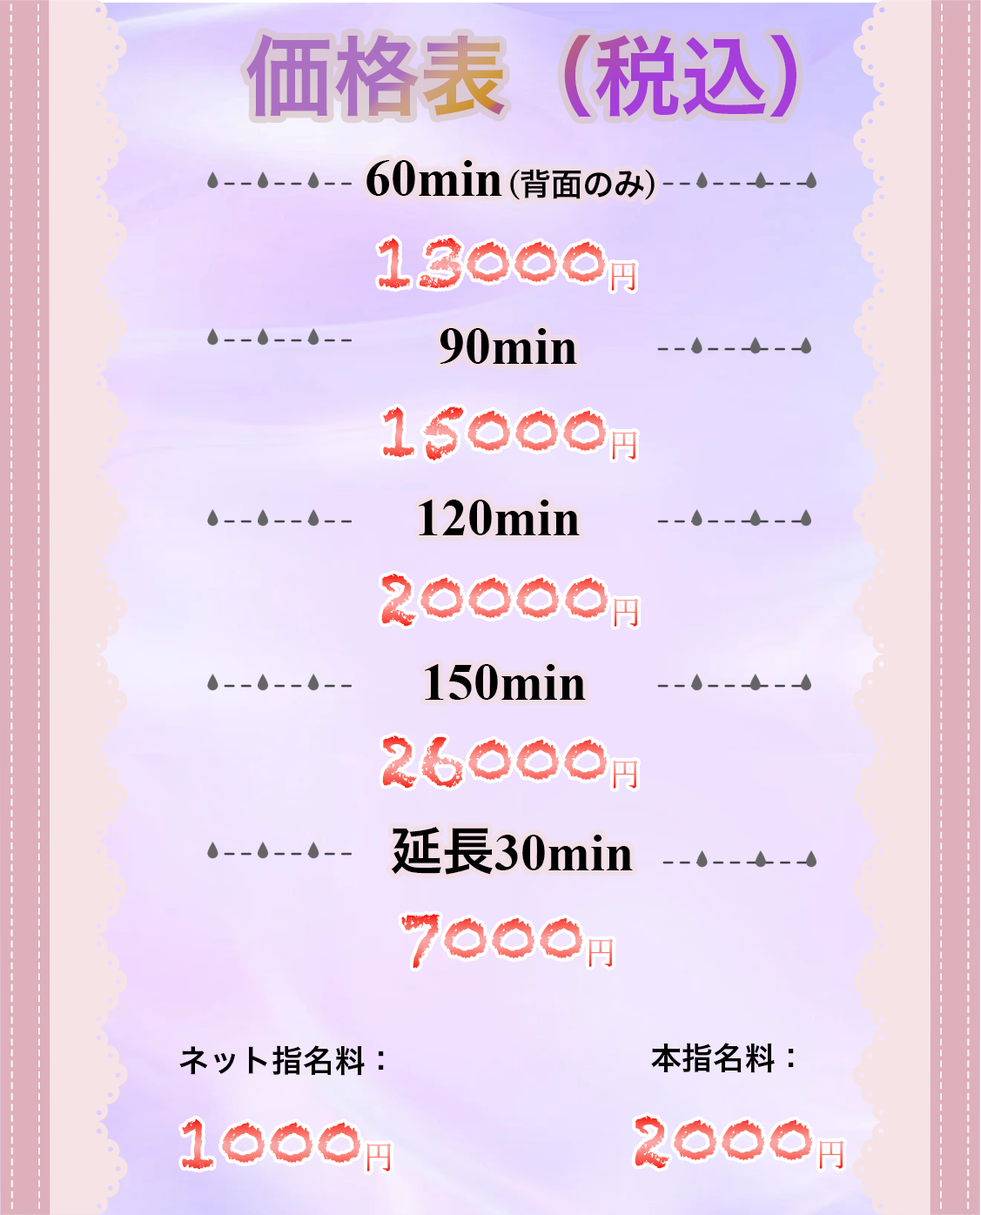
<style>
.page{position:relative;width:981px;height:1215px}
.page>*{position:absolute;margin:0}
.t1{font:87.1px "HiraKakuPro-W6"}
.t2{font:52.2px "TimesNewRomanPS-BoldMT";color:#000000}
.t3{font:31.3px "SimSong-Bold";color:#000000}
.t4{font:31.3px "HiraKakuPro-W6";color:#000000}
.t5{font:69.6px "Chalkduster"}
.t6{font:31.3px "SimSong-Regular"}
.t7{font:52.2px "HiraKakuPro-W6";color:#000000}
</style>
<div class="page">
<p class="t1" style="left:246px;top:34px;width:551px;height:83px">価格表（税込）</p>
<p class="t2" style="left:367px;top:160px;width:288px;height:40px">60min<span class="t3">(</span><span class="t4">背面のみ</span><span class="t3">)</span></p>
<p class="t5" style="left:379px;top:238px;width:257px;height:53px">13000<span class="t6">円</span></p>
<p class="t2" style="left:440px;top:328px;width:137px;height:36px">90min</p>
<p class="t5" style="left:383px;top:407px;width:253px;height:54px">15000<span class="t6">円</span></p>
<p class="t2" style="left:419px;top:500px;width:161px;height:35px">120min</p>
<p class="t5" style="left:381px;top:574px;width:257px;height:53px">20000<span class="t6">円</span></p>
<p class="t2" style="left:425px;top:664px;width:161px;height:36px">150min</p>
<p class="t5" style="left:382px;top:736px;width:255px;height:53px">26000<span class="t6">円</span></p>
<p class="t2" style="left:391px;top:826px;width:242px;height:49px"><span class="t7">延長</span>30min</p>
<p class="t5" style="left:401px;top:914px;width:212px;height:55px">7000<span class="t6">円</span></p>
<p class="t4" style="left:179px;top:1046px;width:205px;height:30px">ネット指名料：</p>
<p class="t4" style="left:651px;top:1043px;width:143px;height:30px">本指名料：</p>
<p class="t5" style="left:182px;top:1119px;width:209px;height:53px">1000<span class="t6">円</span></p>
<p class="t5" style="left:635px;top:1116px;width:209px;height:53px">2000<span class="t6">円</span></p>
</div>
